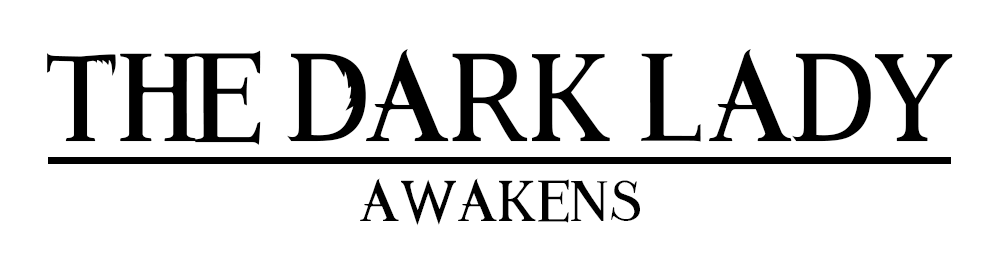
<style>
.page{position:relative;width:1000px;height:267px;background:#ffffff}
.page>*{position:absolute;margin:0}
.t1{font:104.2px "AnimalesFantastic";color:#000000}
.t2{font:48px "AnimalesFantastic";color:#000000}
</style>
<div class="page">
<p class="t1" style="left:47px;top:49px;width:906px;height:96px">The Dark lady</p>
<p class="t2" style="left:360px;top:178px;width:280px;height:48px">awakens</p>
</div>
